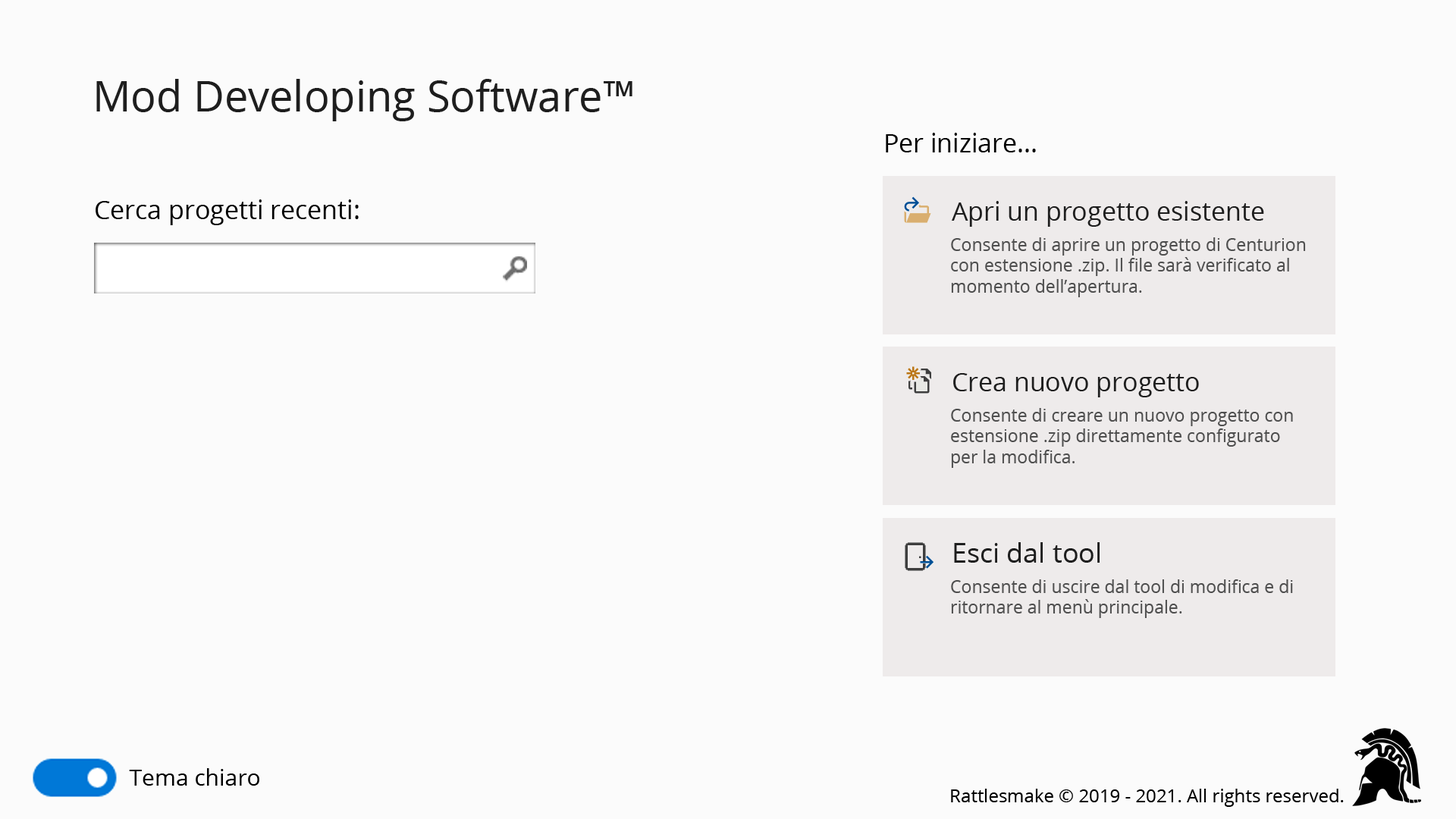
<style>
.page{position:relative;width:1456px;height:819px;background:#fbfbfb}
.page>*{position:absolute;margin:0}
.t1{font:42.5px "OpenSans";color:#1e1e1e}
.t2{font:25.8px "OpenSans";color:#000000}
.t3{font:25.8px "OpenSans";color:#1e1e1e}
.t4{font:17.4px "OpenSans";color:#4f4f4f}
.t5{font:27.3px "OpenSans";color:#1e1e1e}
.t6{font:22.7px "OpenSans";color:#000000}
.t7{font:18.2px "OpenSans";color:#000000}
</style>
<div class="page">
<p class="t1" style="left:96px;top:79px;width:536px;height:42px">Mod Developing Software™</p>
<p class="t2" style="left:886px;top:133px;width:150px;height:19px">Per iniziare...</p>
<p class="t2" style="left:96px;top:199px;width:263px;height:26px">Cerca progetti recenti:</p>
<p class="t3" style="left:952px;top:201px;width:312px;height:26px">Apri un progetto esistente</p>
<p class="t4" style="left:951px;top:237px;width:355px;height:60px">Consente di aprire un progetto di Centurion<br>con estensione .zip. Il file sarà verificato al<br>momento dell’apertura.</p>
<p class="t3" style="left:953px;top:373px;width:246px;height:24px">Crea nuovo progetto</p>
<p class="t4" style="left:951px;top:408px;width:342px;height:60px">Consente di creare un nuovo progetto con<br>estensione .zip direttamente configurato<br>per la modifica.</p>
<p class="t5" style="left:954px;top:542px;width:146px;height:21px">Esci dal tool</p>
<p class="t4" style="left:951px;top:579px;width:342px;height:39px">Consente di uscire dal tool di modifica e di<br>ritornare al menù principale.</p>
<p class="t6" style="left:129px;top:768px;width:130px;height:18px">Tema chiaro</p>
<p class="t7" style="left:951px;top:789px;width:393px;height:18px">Rattlesmake © 2019 - 2021. All rights reserved.</p>
</div>
